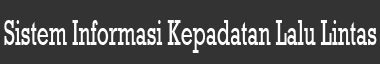
<style>
.page{position:relative;width:380px;height:64px;background:#333333}
.page>*{position:absolute;margin:0}
.t1{font:35.7px "Rockwell";color:#ffffff;scale:0.59 1}
</style>
<div class="page">
<p class="t1" style="left:4px;top:20px;width:373px;height:33px">Sistem Informasi Kepadatan Lalu Lintas</p>
</div>
